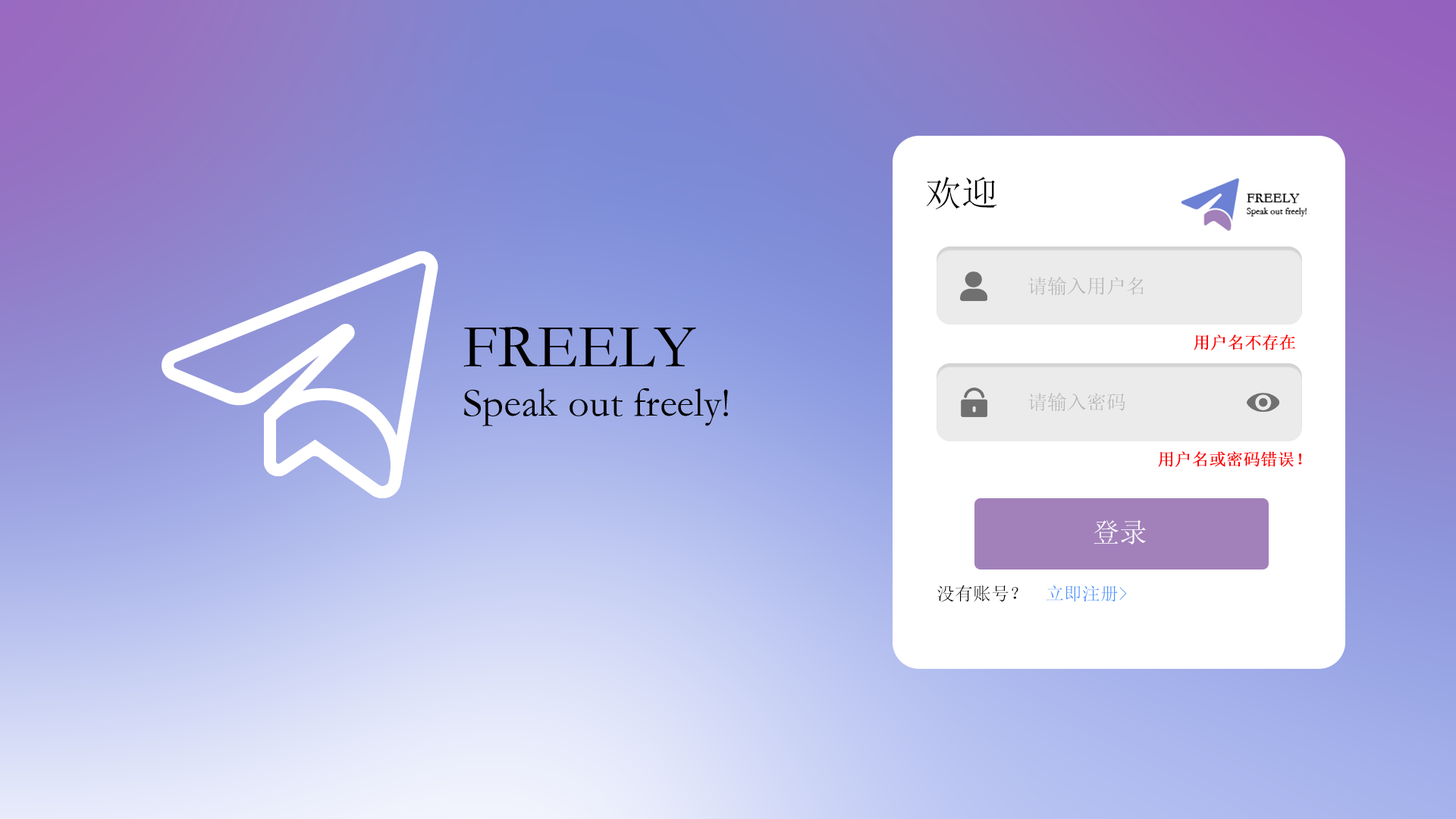
<style>
.page{position:relative;width:1456px;height:819px}
.page>*{position:absolute;margin:0}
.t1{font:36.4px "SimSun";color:#000000}
.t2{font:19.7px "SimSun";color:#b4b4b4}
.t3{font:16.7px "SimSun";color:#ff0101;font-weight:bold}
.t4{font:27.3px "SimSun";color:#ffffff}
.t5{font:18.2px "SimSun";color:#000000}
.t6{font:18.2px "SimSun";color:#4491fa}
</style>
<div class="page">
<p class="t1" style="left:927px;top:177px;width:70px;height:32px">欢迎</p>
<p class="t2" style="left:1028px;top:277px;width:116px;height:19px">请输入用户名</p>
<p class="t3" style="left:1194px;top:334px;width:101px;height:16px">用户名不存在</p>
<p class="t2" style="left:1028px;top:393px;width:97px;height:19px">请输入密码</p>
<p class="t3" style="left:1158px;top:451px;width:144px;height:16px">用户名或密码错误！</p>
<p class="t4" style="left:1094px;top:519px;width:52px;height:25px">登录</p>
<p class="t5" style="left:937px;top:585px;width:190px;height:17px">没有账号？ <span class="t6"> 立即注册&gt;</span></p>
</div>
